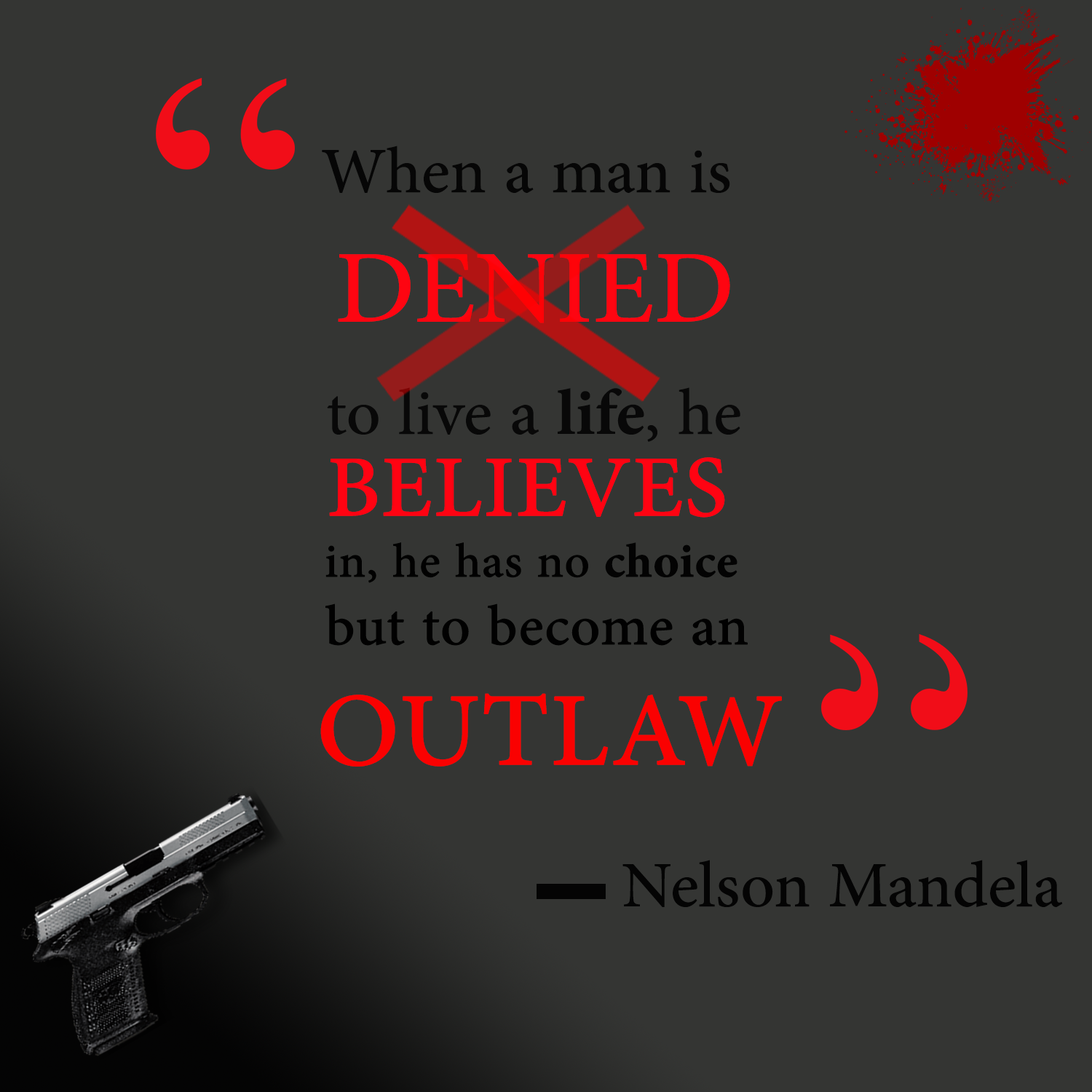
<style>
.page{position:relative;width:1092px;height:1092px;background:#343533}
.page>*{position:absolute;margin:0}
.t1{font:91px "AdobeArabic-Regular";color:#060606}
.t2{font:145.6px "AdobeArabic-Regular";color:#fe0511}
.t3{font:91px "AdobeArabic-Regular";color:#080808}
.t4{font:91px "AdobeArabic-Bold";color:#080808}
.t5{font:121.3px "AdobeArabic-Regular";color:#ff0312;font-weight:bold}
.t6{font:66.7px "AdobeArabic-Regular";color:#010101;font-weight:bold}
.t7{font:66.7px "AdobeArabic-Bold";color:#030303;font-weight:bold}
.t8{font:78.9px "AdobeArabic-Regular";color:#010101;font-weight:bold}
.t9{font:145.6px "AdobeArabic-Regular";color:#fa0101;font-weight:bold}
.t10{font:91px "AdobeArabic-Regular";color:#040404}
</style>
<div class="page">
<p class="t1" style="left:322px;top:146px;width:408px;height:47px">When a man is</p>
<p class="t2" style="left:338px;top:254px;width:392px;height:69px">DENIED</p>
<p class="t3" style="left:327px;top:387px;width:413px;height:55px">to live a <span class="t4">life</span>, he</p>
<p class="t5" style="left:329px;top:457px;width:396px;height:61px">BELIEVES</p>
<p class="t6" style="left:325px;top:542px;width:412px;height:41px">in, he has no <span class="t7">choice</span></p>
<p class="t8" style="left:325px;top:604px;width:423px;height:42px">but to become an</p>
<p class="t9" style="left:320px;top:693px;width:462px;height:74px">OUTLAW</p>
<p class="t10" style="left:622px;top:860px;width:441px;height:47px">Nelson Mandela</p>
</div>
